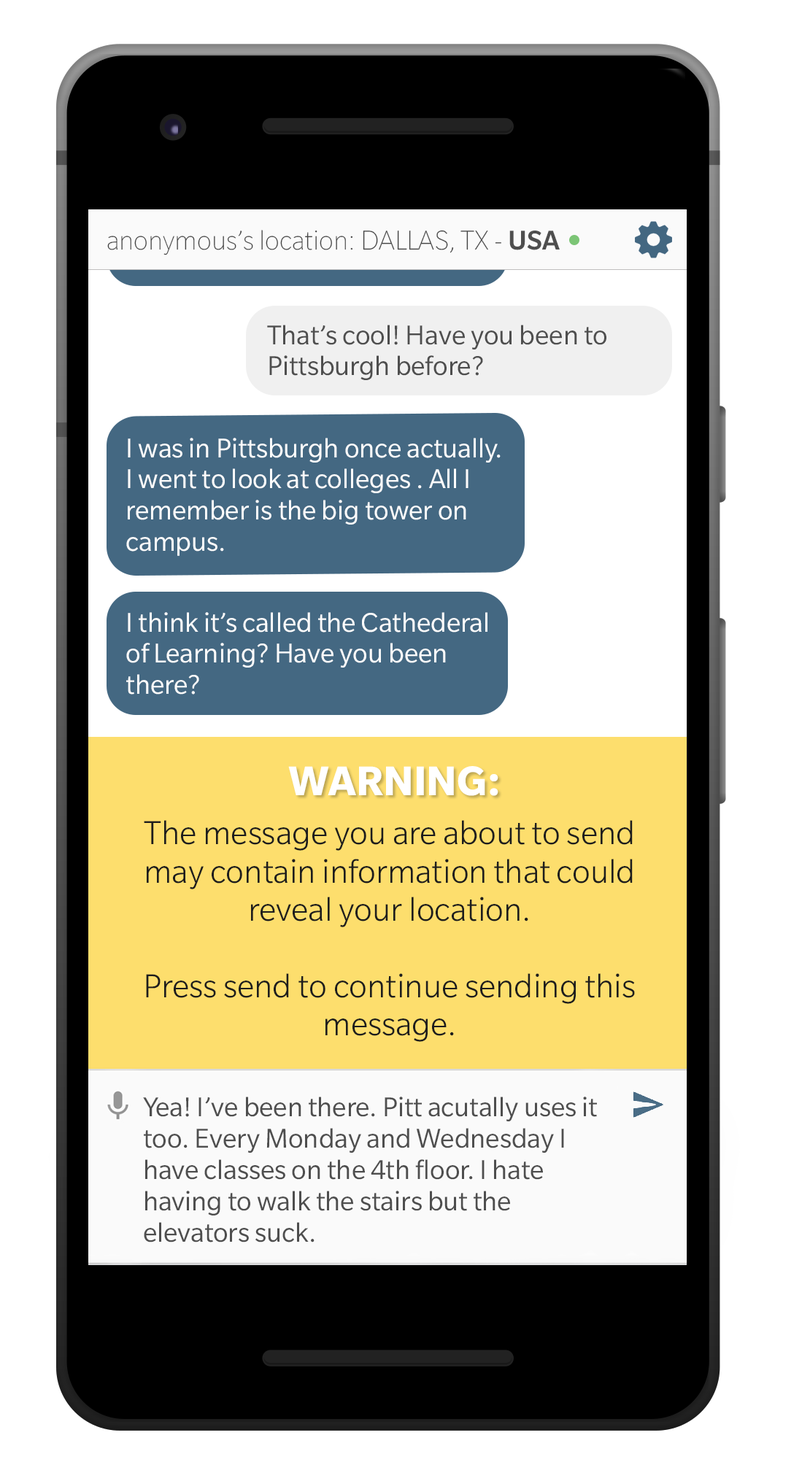
<style>
.page{position:relative;width:810px;height:1473px;background:#ffffff}
.page>*{position:absolute;margin:0}
.t1{font:26px "SlateForOnePlusThin";color:#434343}
.t2{font:26px "SlateForOnePlusMedium";color:#4e4e4e}
.t3{font:26px "SlateForOnePlusBk";color:#4e4e4e}
.t4{font:26px "SlateForOnePlusBk";color:#fcfcfc}
.t5{font:39.9px "SlateForOnePlus-Bold";color:#ffffff}
.t6{font:31.8px "SlateForOnePlusLight";color:#1d1d1d}
</style>
<div class="page">
<p class="t1" style="left:107px;top:230px;width:452px;height:25px">anonymous’s location: DALLAS, TX - <span class="t2">USA</span></p>
<p class="t3" style="left:267px;top:325px;width:339px;height:55px">That’s cool! Have you been to<br>Pittsburgh before?</p>
<p class="t4" style="left:126px;top:438px;width:374px;height:118px">I was in Pittsburgh once actually. <br>I went to look at colleges . All I <br>remember is the big tower on<br>campus.</p>
<p class="t4" style="left:126px;top:612px;width:361px;height:82px">I think it’s called the Cathederal<br>of Learning? Have you been<br>there?</p>
<p class="t5" style="left:288px;top:766px;width:210px;height:30px">WARNING:</p>
<p class="t6" style="left:144px;top:820px;width:491px;height:222px;text-align:center">The message you are about to send may contain information that could reveal your location.<br><br>Press send to continue sending this message.</p>
<p class="t3" style="left:143px;top:1096px;width:454px;height:146px">Yea! I’ve been there. Pitt acutally uses it too. Every Monday and Wednesday I have classes on the 4th floor. I hate having to walk the stairs but the elevators suck.</p>
</div>
